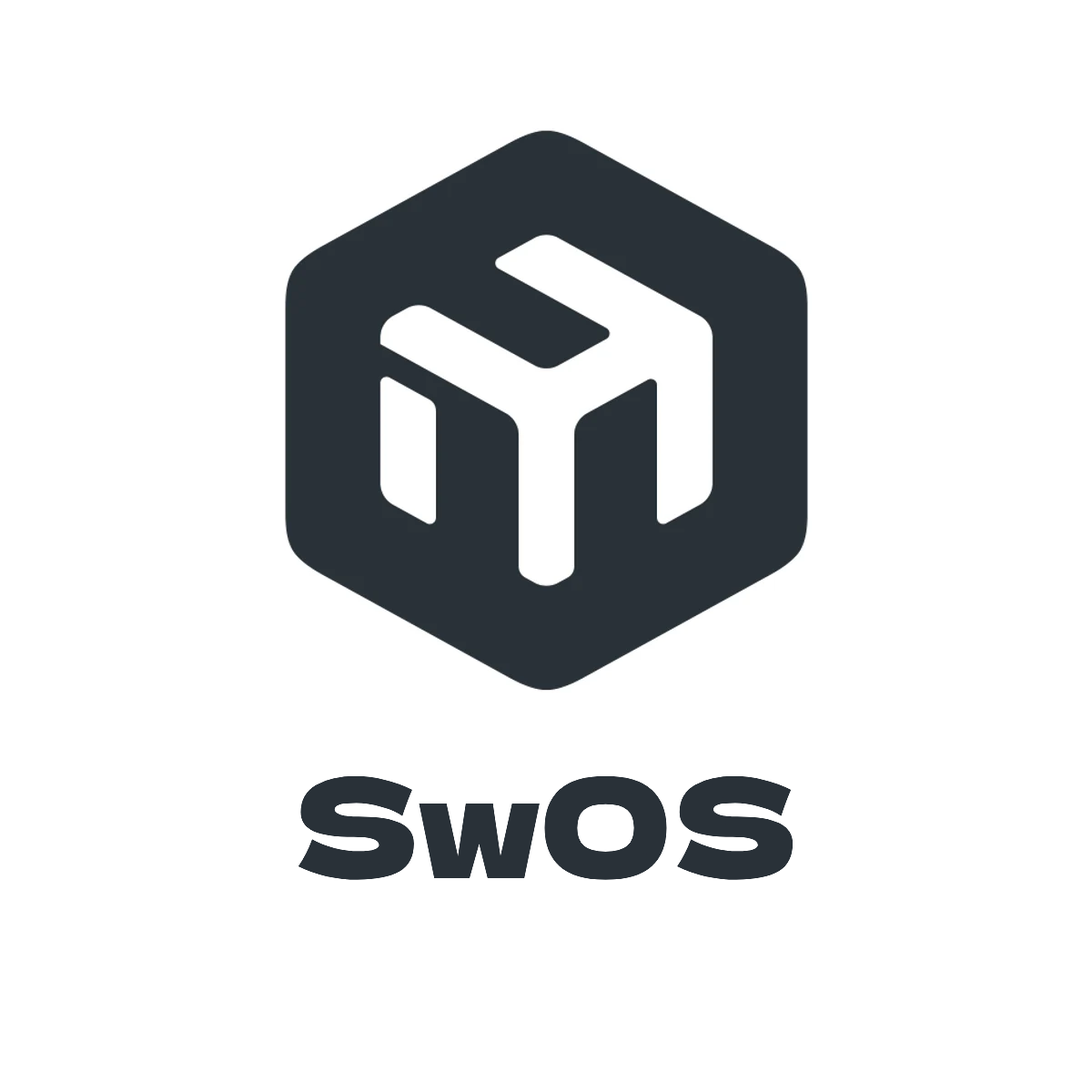
<style>
.page{position:relative;width:1092px;height:1092px;background:#ffffff}
.page>*{position:absolute;margin:0}
.t1{font:136.5px "DelaGothicOne-Regular";color:#293138}
</style>
<div class="page">
<p class="t1" style="left:298px;top:775px;width:495px;height:105px">SwOS</p>
</div>
